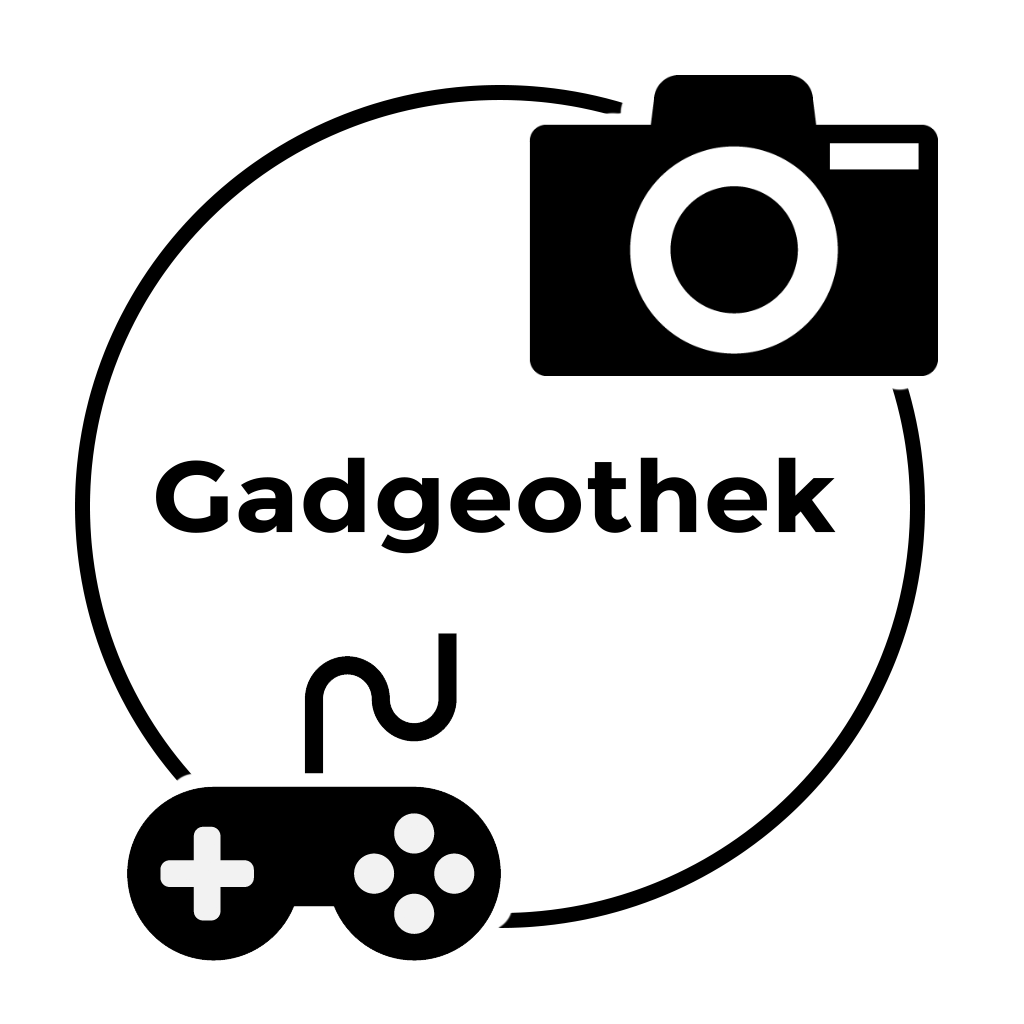
<style>
.page{position:relative;width:1024px;height:1024px;background:#ffffff}
.page>*{position:absolute;margin:0}
.t1{font:100px "Montserrat-Bold";color:#000000;scale:1.1 1}
</style>
<div class="page">
<p class="t1" style="left:156px;top:457px;width:680px;height:97px">Gadgeothek</p>
</div>
